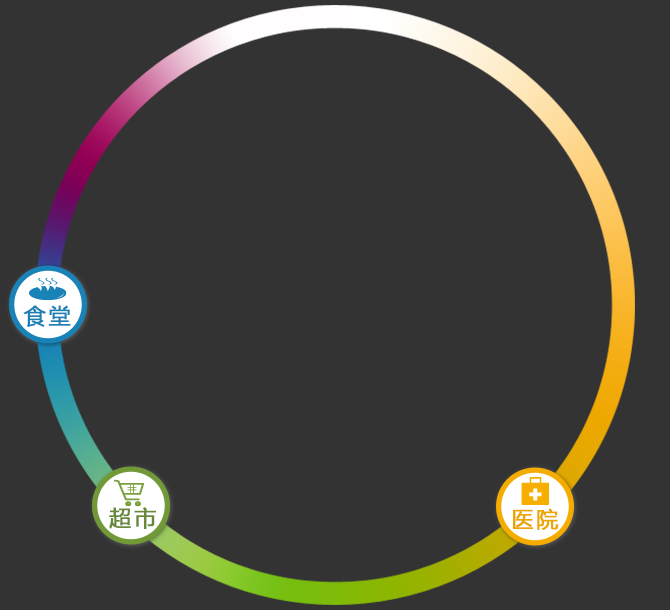
<style>
.page{position:relative;width:670px;height:610px;background:#333333}
.page>*{position:absolute;margin:0}
.t1{font:22px "MicrosoftYaHei";letter-spacing:0.1em;color:#1981b6;font-weight:bold}
.t2{font:22px "MicrosoftYaHei";letter-spacing:0.1em;color:#678836;font-weight:bold}
.t3{font:22px "MicrosoftYaHei";letter-spacing:0.1em;color:#eca600;font-weight:bold}
</style>
<div class="page">
<p class="t1" style="left:23px;top:305px;width:48px;height:22px">食堂</p>
<p class="t2" style="left:109px;top:507px;width:47px;height:22px">超市</p>
<p class="t3" style="left:513px;top:508px;width:46px;height:22px">医院</p>
</div>
